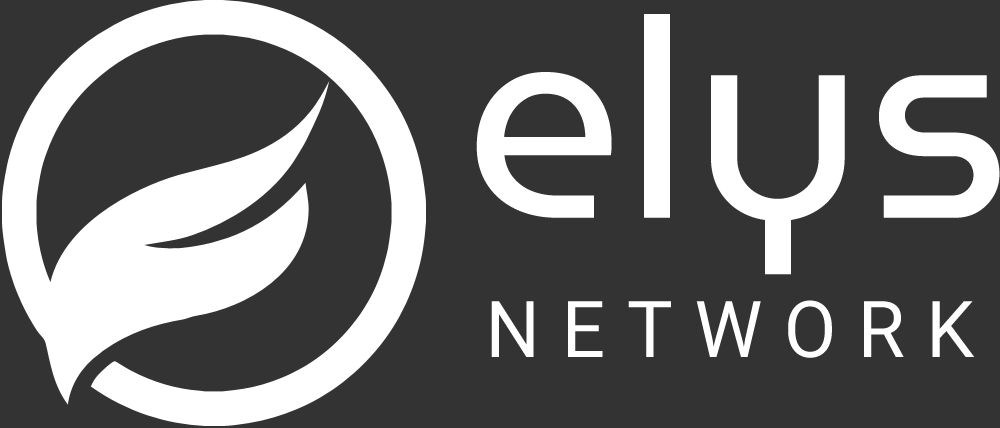
<style>
.page{position:relative;width:1000px;height:428px;background:#333333}
.page>*{position:absolute;margin:0}
.t1{font:278.8px "MuseoModerno-Regular";color:#ffffff}
.t2{font:78.3px "Roboto-Regular";letter-spacing:0.28em;color:#ffffff}
</style>
<div class="page">
<p class="t1" style="left:476px;top:14px;width:524px;height:261px">elys</p>
<p class="t2" style="left:491px;top:300px;width:484px;height:58px">NETWORK</p>
</div>
